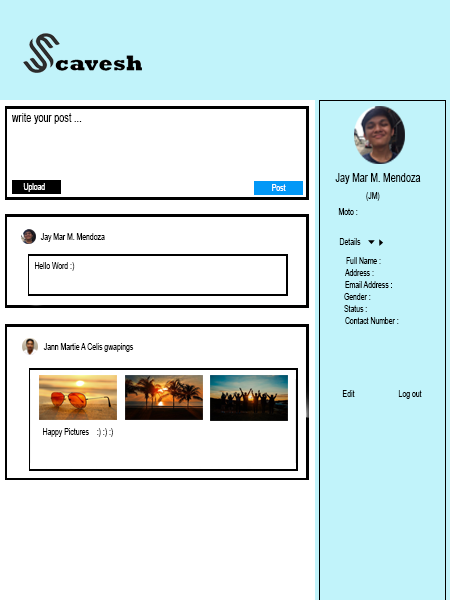
<style>
.page{position:relative;width:450px;height:600px;background:#ffffff}
.page>*{position:absolute;margin:0}
.t1{font:12px "ArialMT";letter-spacing:0.005em;color:#000000;scale:0.75 1}
.t2{font:9px "ArialMT";letter-spacing:0.005em;color:#ffffff;scale:0.75 1}
.t3{font:9px "ArialMT";letter-spacing:0.005em;color:#000000;scale:0.75 1}
.t4{font:9px "ArialMT";letter-spacing:0.005em;color:#010101;scale:0.75 1}
</style>
<div class="page">
<p class="t1" style="left:12px;top:113px;width:70px;height:11px">write your post ...</p>
<p class="t1" style="left:335px;top:173px;width:86px;height:11px">Jay Mar M. Mendoza</p>
<p class="t2" style="left:23px;top:183px;width:22px;height:9px">Upload</p>
<p class="t2" style="left:272px;top:184px;width:14px;height:7px">Post</p>
<p class="t3" style="left:366px;top:192px;width:14px;height:9px">(JM)</p>
<p class="t3" style="left:338px;top:208px;width:20px;height:7px">Moto :</p>
<p class="t4" style="left:40px;top:233px;width:65px;height:9px">Jay Mar M. Mendoza</p>
<p class="t3" style="left:339px;top:238px;width:22px;height:7px">Details</p>
<p class="t3" style="left:346px;top:257px;width:35px;height:7px">Full Name :</p>
<p class="t3" style="left:35px;top:262px;width:40px;height:9px">Hello Word :)</p>
<p class="t3" style="left:345px;top:269px;width:29px;height:7px">Address :</p>
<p class="t3" style="left:345px;top:281px;width:47px;height:7px">Email Address :</p>
<p class="t3" style="left:344px;top:293px;width:27px;height:7px">Gender :</p>
<p class="t3" style="left:344px;top:305px;width:23px;height:7px">Status :</p>
<p class="t3" style="left:345px;top:317px;width:54px;height:7px">Contact Number :</p>
<p class="t4" style="left:43px;top:343px;width:91px;height:9px">Jann Martie A Celis gwapings</p>
<p class="t3" style="left:342px;top:390px;width:13px;height:7px">Edit</p>
<p class="t3" style="left:398px;top:390px;width:24px;height:9px">Log out</p>
<p class="t3" style="left:43px;top:428px;width:70px;height:9px">Happy Pictures    :) :) :)</p>
</div>
